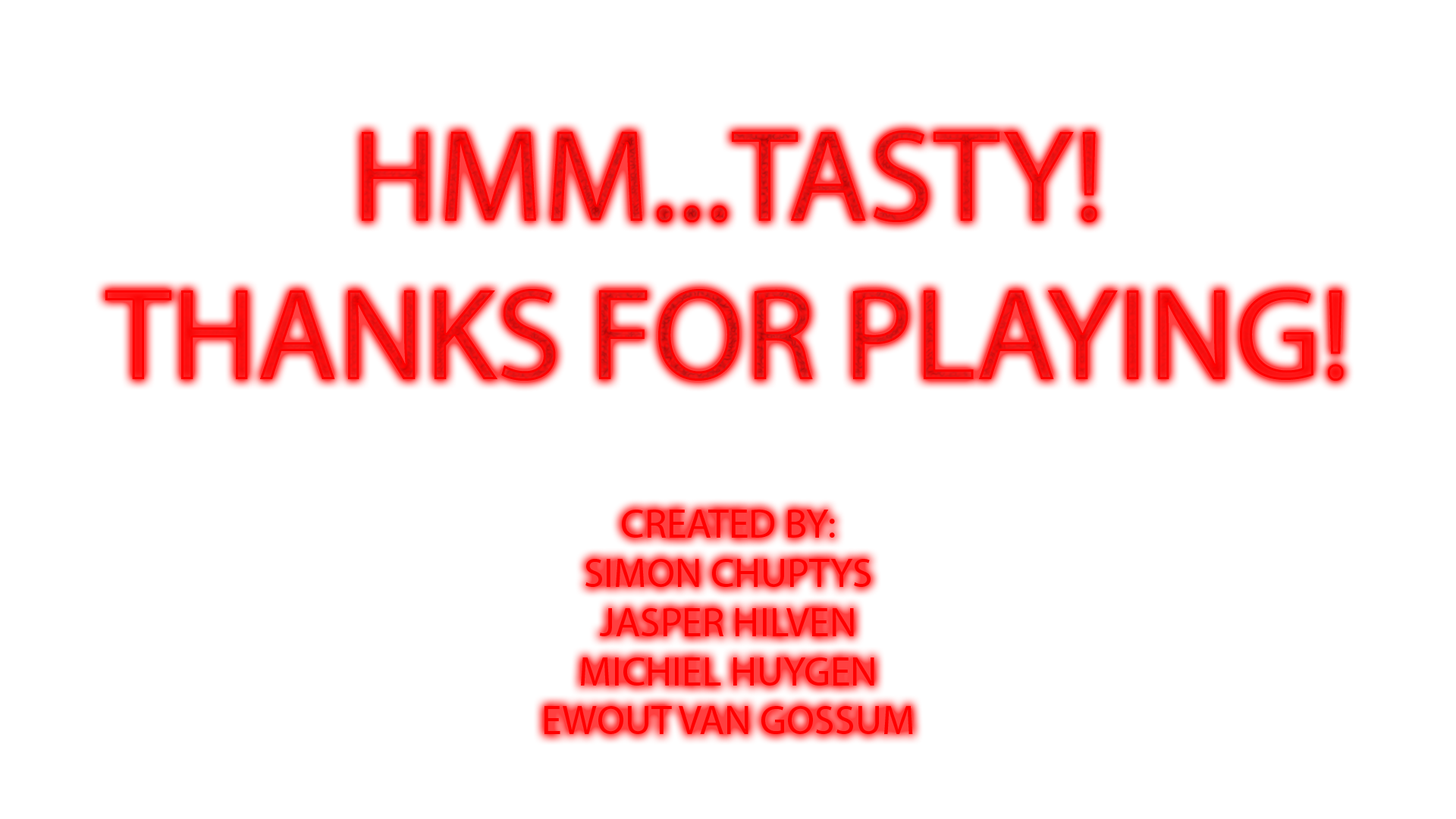
<style>
.page{position:relative;width:1456px;height:819px;background:#ffffff}
.page>*{position:absolute;margin:0}
.t1{font:41px "MyriadPro-Regular";color:#ff0000}
.t2{font:132px "MyriadPro-Regular";color:#ff0000}
</style>
<div class="page">
<p class="t1" style="left:105px;top:130px;width:1239px;height:604px;text-align:center"><span class="t2">HMM...TASTY!<br>THANKS FOR PLAYING!<br><br><br><br><br><br></span>CREATED BY:<br>SIMON CHUPTYS<br>JASPER HILVEN<br>MICHIEL HUYGEN<br>EWOUT VAN GOSSUM</p>
</div>
